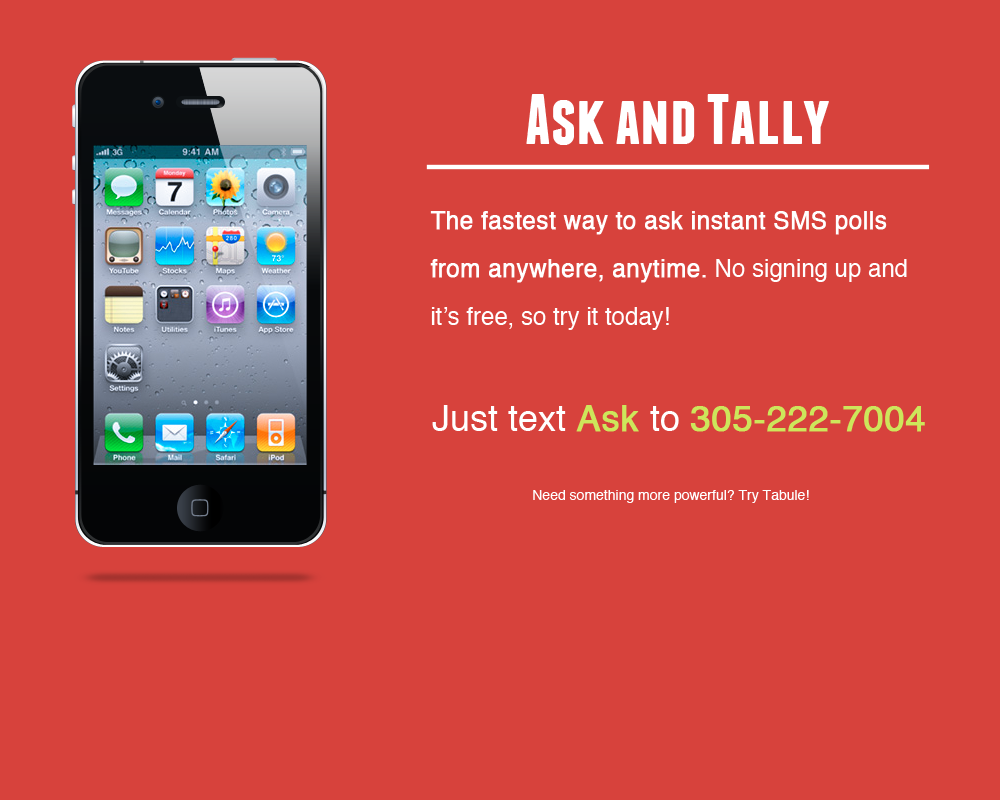
<style>
.page{position:relative;width:1000px;height:800px;background:#d7423c}
.page>*{position:absolute;margin:0}
.t1{font:72px "Franchise-Bold";color:#ffffff}
.t2{font:24px/48px "Helvetica";color:#ffffff;font-weight:bold}
.t3{font:24px/48px "Helvetica";color:#ffffff}
.t4{font:36px "Helvetica";color:#cde65b;font-weight:bold}
.t5{font:36px "Helvetica";color:#ffffff}
.t6{font:14px "Helvetica";color:#ffffff}
</style>
<div class="page">
<p class="t1" style="left:526px;top:94px;width:303px;height:51px">Ask and Tally</p>
<p class="t2" style="left:430px;top:211px;width:477px;height:119px">The fastest way to ask instant SMS polls <br>from anywhere, anytime.<span class="t3"> No signing up and<br>it’s free, so try it today!</span></p>
<p class="t4" style="left:432px;top:405px;width:493px;height:27px"><span class="t5">Just text </span>Ask <span class="t5">to </span>305-222-7004</p>
<p class="t6" style="left:533px;top:490px;width:276px;height:13px">Need something more powerful? Try Tabule!</p>
</div>
